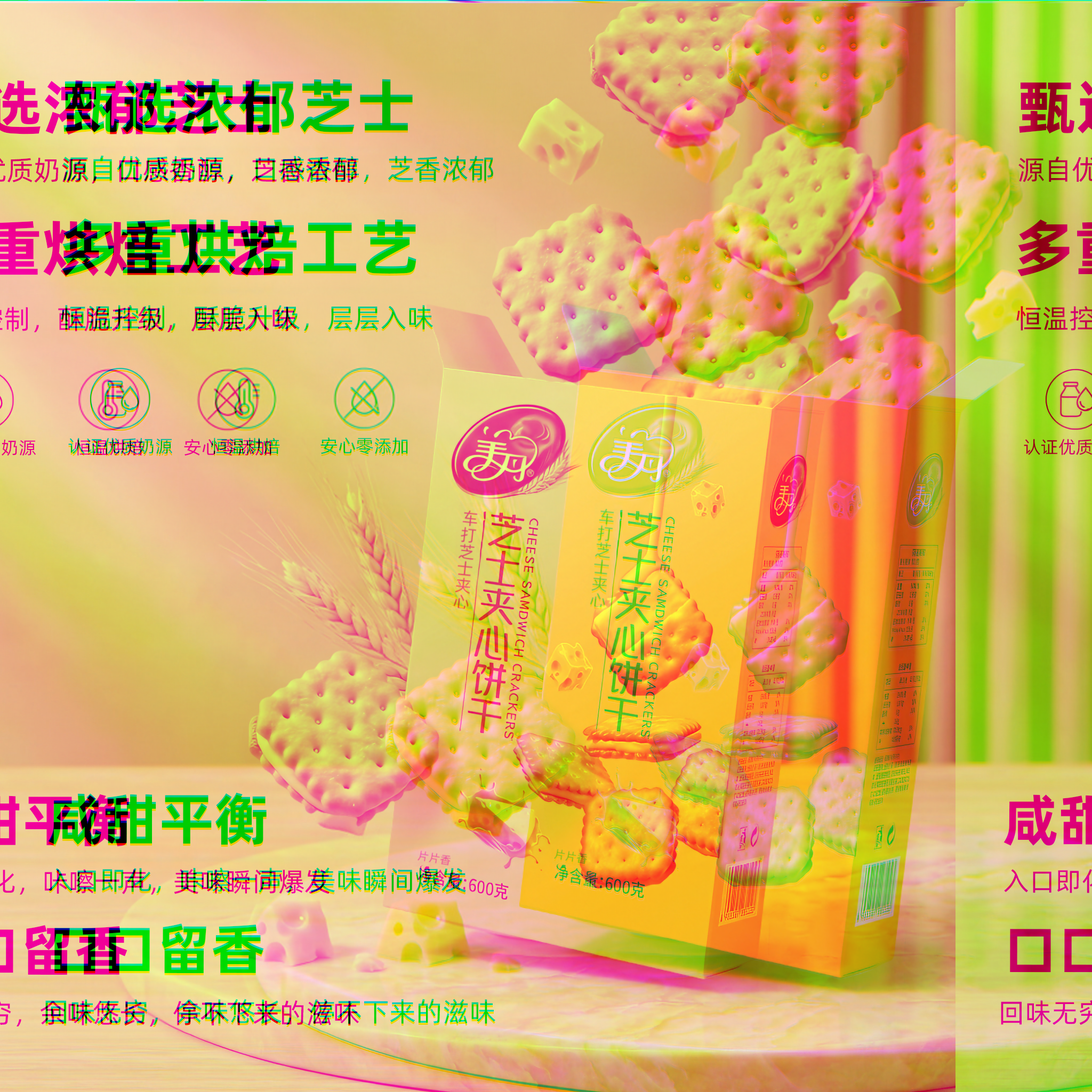
<style>
.page{position:relative;width:1092px;height:1092px}
.page>*{position:absolute;margin:0}
.t1{font:60px "AlibabaPuHuiTi-Bold"}
.t2{font:27.5px "AlibabaPuHuiTi-Regular"}
.t3{font:61.3px "AlibabaPuHuiTi-Bold"}
.t4{font:27.1px "AlibabaPuHuiTi-Regular"}
.t5{font:17.8px "AlibabaPuHuiTi-Regular"}
.t6{font:16.9px "AdobeHeitiStd-Regular"}
.t7{font:56.4px "AlibabaPuHuiTi-Bold"}
.t8{font:11.6px "AdobeHeitiStd-Regular"}
.t9{font:26.7px "AlibabaPuHuiTi-Regular"}
.t10{font:55.5px "AlibabaPuHuiTi-Bold"}
</style>
<div class="page">
<p class="t1" style="left:63px;top:77px;width:350px;height:55px">甄选浓郁芝士</p>
<p class="t2" style="left:63px;top:154px;width:430px;height:27px">源自优质奶源，口感香醇，芝香浓郁</p>
<p class="t3" style="left:62px;top:217px;width:354px;height:57px">多重烘焙工艺</p>
<p class="t4" style="left:61px;top:304px;width:372px;height:26px">恒温控制，酥脆升级，层层入味</p>
<p class="t5" style="left:68px;top:437px;width:104px;height:16px">认证优质奶源</p>
<p class="t6" style="left:590px;top:507px;width:24px;height:99px;rotate:6deg">车打芝士夹心</p>
<p class="t7" style="left:48px;top:791px;width:219px;height:53px">咸甜平衡</p>
<p class="t8" style="left:553px;top:848px;width:35px;height:15px;rotate:10deg">片片香</p>
<p class="t9" style="left:49px;top:866px;width:417px;height:26px">入口即化，咔嚓一声，美味瞬间爆发</p>
<p class="t10" style="left:54px;top:922px;width:210px;height:51px">口口留香</p>
<p class="t4" style="left:45px;top:998px;width:450px;height:26px">回味无穷，余味悠长，停不下来的滋味</p>
</div>
